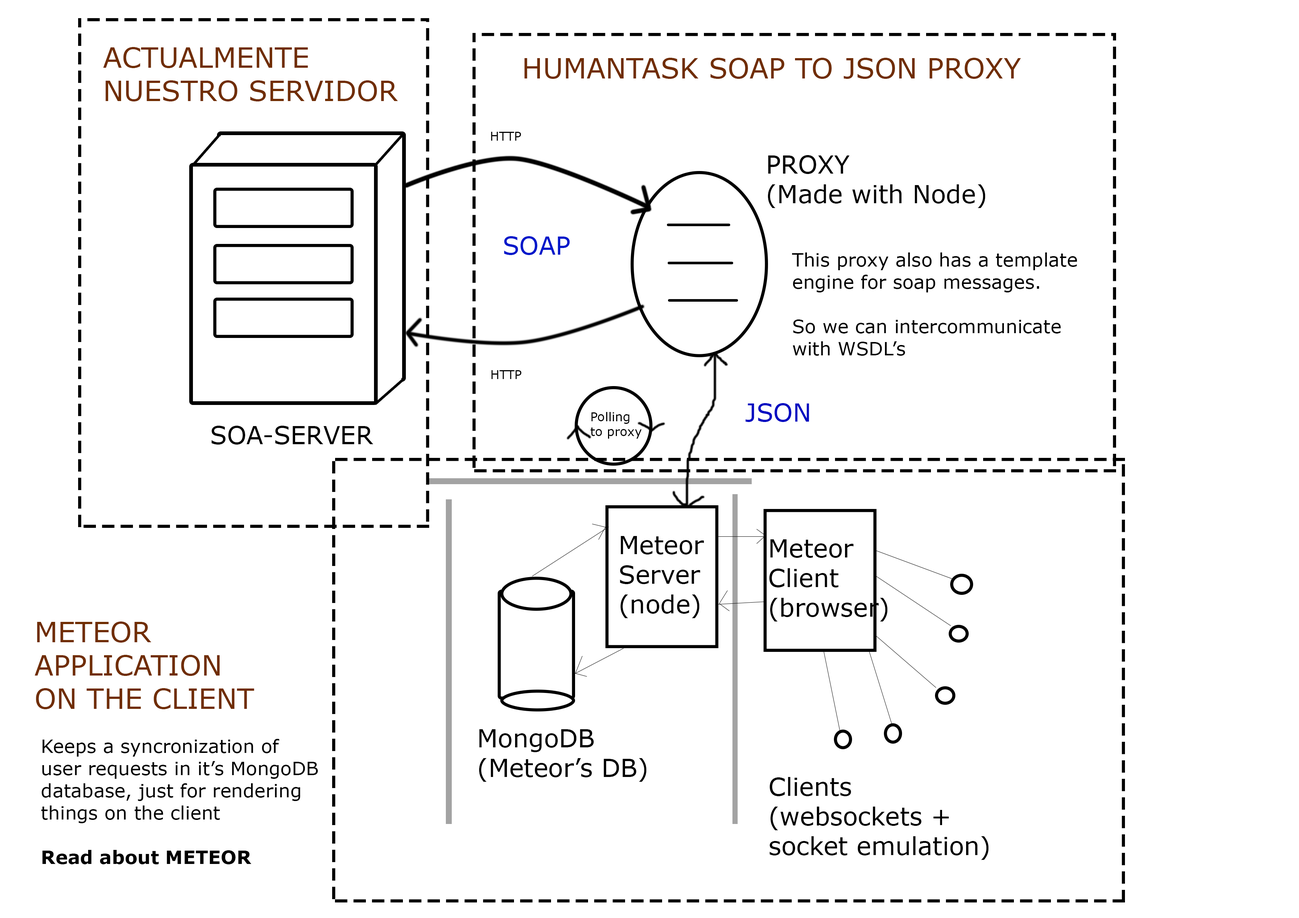
<style>
.page{position:relative;width:1299px;height:918px;background:#ffffff}
.page>*{position:absolute;margin:0}
.t1{font:27.8px "Verdana";color:#702d00}
.t2{font:12.3px "Verdana";color:#000000}
.t3{font:24.7px "Verdana";color:#000000}
.t4{font:24.7px "Verdana";color:#0018ca}
.t5{font:18.5px "Verdana";color:#000000}
.t6{font:24.7px "Verdana";color:#0009c1}
.t7{font:18.5px "Verdana-Bold";color:#000000}
</style>
<div class="page">
<p class="t1" style="left:103px;top:47px;width:295px;height:54px">ACTUALMENTE<br>NUESTRO SERVIDOR</p>
<p class="t1" style="left:524px;top:58px;width:497px;height:21px">HUMANTASK SOAP TO JSON PROXY</p>
<p class="t2" style="left:491px;top:132px;width:30px;height:9px">HTTP</p>
<p class="t3" style="left:767px;top:155px;width:218px;height:53px">PROXY <br>(Made with Node)</p>
<p class="t4" style="left:504px;top:236px;width:66px;height:19px">SOAP</p>
<p class="t5" style="left:792px;top:252px;width:285px;height:104px">This proxy also has a template<br>engine for soap messages.<br><br>So we can intercommunicate<br>with WSDL’s</p>
<p class="t2" style="left:491px;top:370px;width:30px;height:9px">HTTP</p>
<p class="t2" style="left:591px;top:412px;width:51px;height:27px">Polling<br>to proxy</p>
<p class="t6" style="left:745px;top:403px;width:64px;height:19px">JSON</p>
<p class="t3" style="left:211px;top:426px;width:162px;height:19px">SOA-SERVER</p>
<p class="t3" style="left:620px;top:536px;width:84px;height:82px">Meteor<br>Server<br>(node)</p>
<p class="t3" style="left:769px;top:539px;width:118px;height:83px">Meteor<br>Client<br>(browser)</p>
<p class="t1" style="left:34px;top:622px;width:220px;height:87px">METEOR<br>APPLICATION<br>ON THE CLIENT</p>
<p class="t3" style="left:479px;top:729px;width:167px;height:53px">MongoDB<br>(Meteor’s DB)</p>
<p class="t5" style="left:41px;top:739px;width:277px;height:125px">Keeps a syncronization of<br>user requests in it’s MongoDB<br>database, just for rendering<br>things on the client<br><br><span class="t7">Read about METEOR</span></p>
<p class="t3" style="left:769px;top:777px;width:219px;height:83px">Clients<br>(websockets + <br>socket emulation)</p>
</div>
